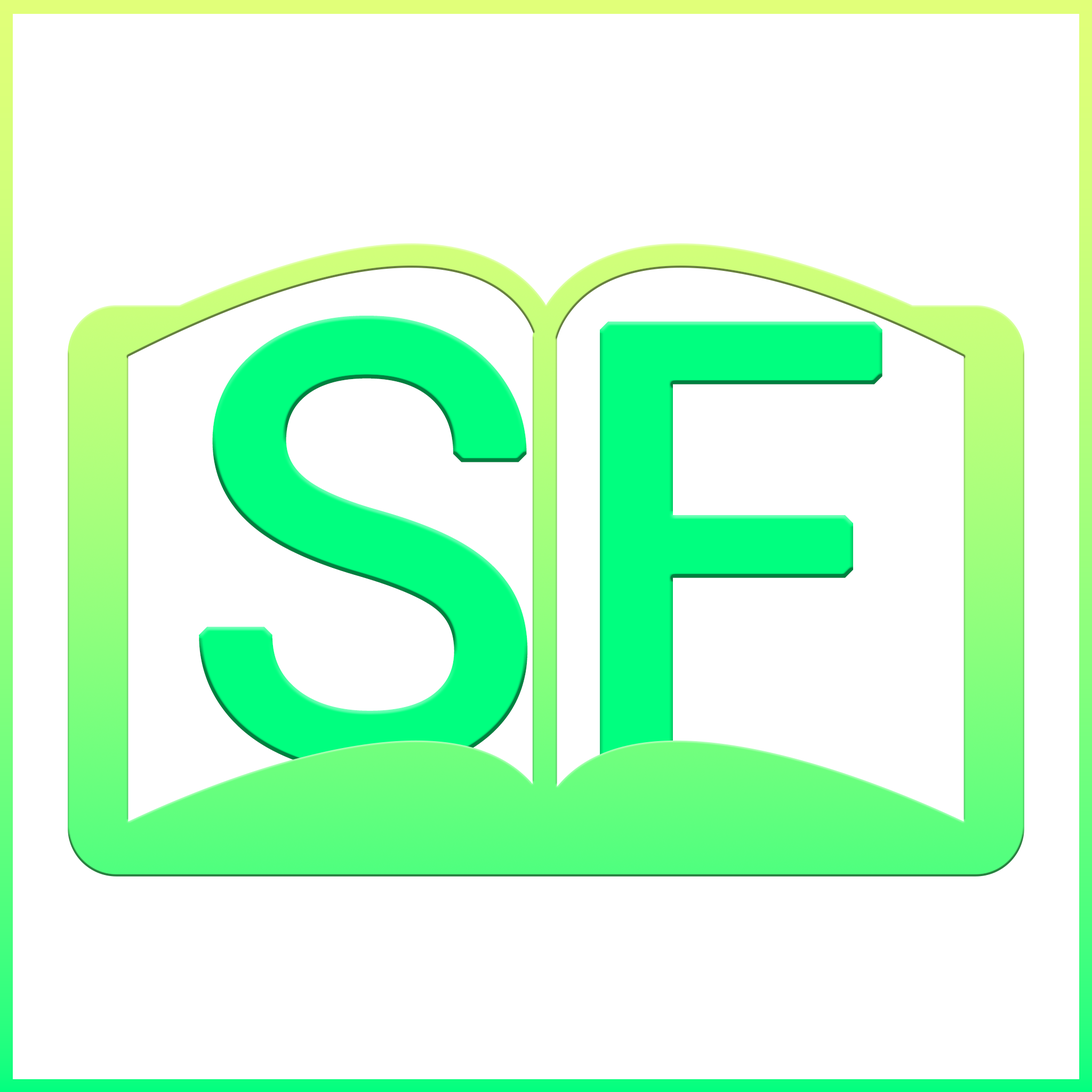
<style>
.page{position:relative;width:1092px;height:1092px;background:#ffffff}
.page>*{position:absolute;margin:0}
.t1{font:604.1px "Roboto-Regular";color:#00ff7f;font-weight:bold}
</style>
<div class="page">
<p class="t1" style="left:199px;top:316px;width:683px;height:458px">SF</p>
</div>
